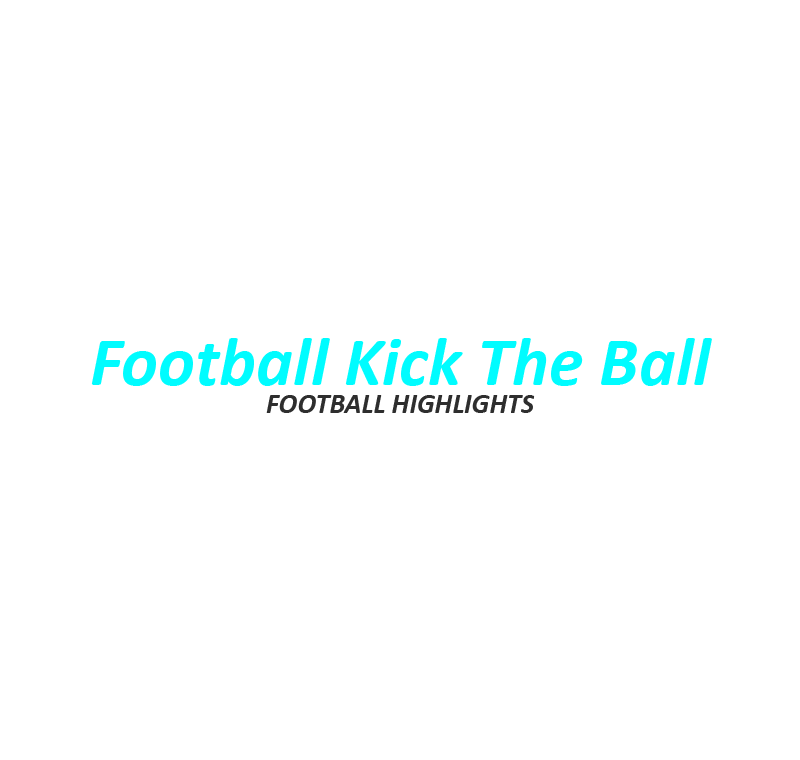
<style>
.page{position:relative;width:800px;height:760px;background:#ffffff}
.page>*{position:absolute;margin:0}
.t1{font:70.1px "Calibri-BoldItalic";color:#00fcff}
.t2{font:28px "Calibri-BoldItalic";color:#2e2e2e}
</style>
<div class="page">
<p class="t1" style="left:91px;top:338px;width:621px;height:48px">Football Kick The Ball</p>
<p class="t2" style="left:266px;top:395px;width:269px;height:18px">FOOTBALL HIGHLIGHTS</p>
</div>
